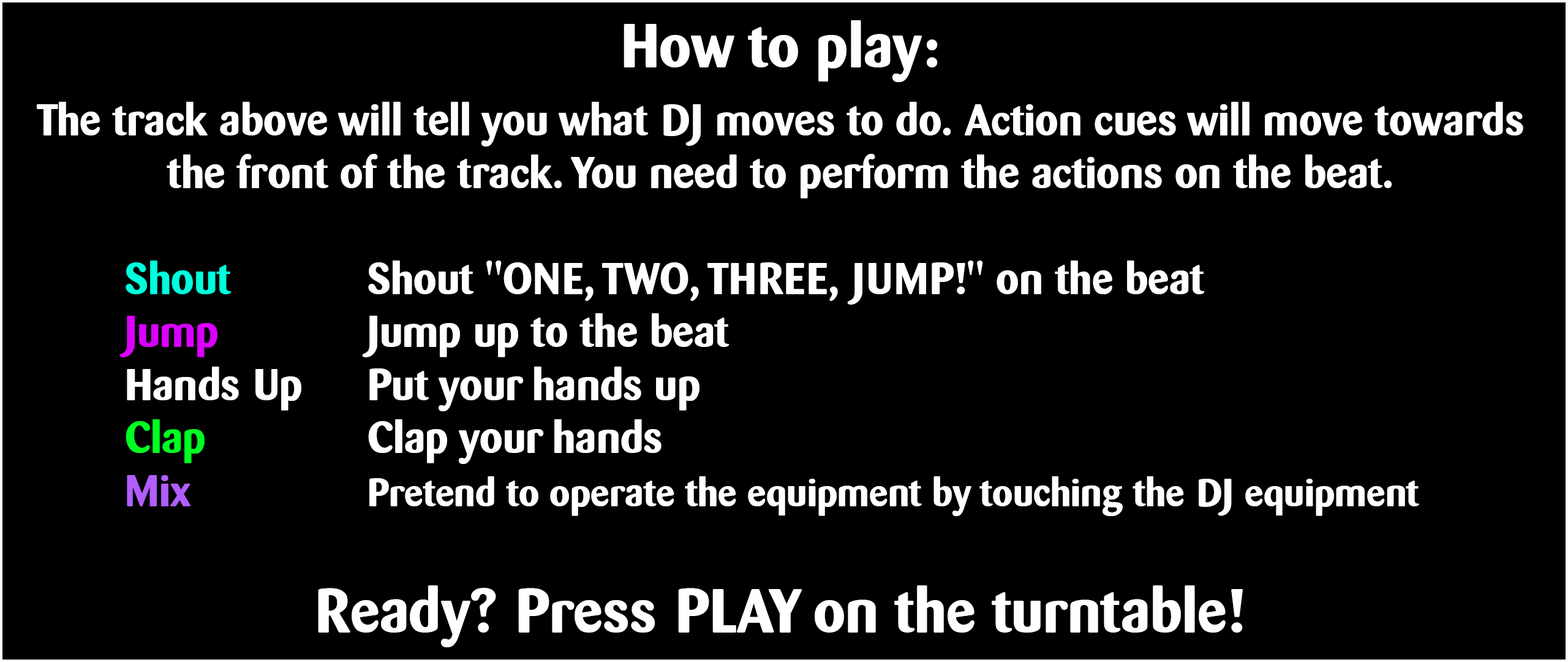
<style>
.page{position:relative;width:1568px;height:662px;background:#000000}
.page>*{position:absolute;margin:0}
.t1{font:44.1px "Barmeno-Bold";color:#ffffff}
.t2{font:61.3px "Barmeno-Bold";color:#ffffff}
.t3{font:44.1px "Barmeno-Bold";color:#00ffdd}
.t4{font:44.1px "Barmeno-Bold";color:#d900ff}
.t5{font:44.1px "Barmeno-Bold";color:#00ff22}
.t6{font:44.1px "Barmeno-Bold";color:#b15dff}
.t7{font:39.2px "Barmeno-Bold";color:#ffffff}
</style>
<div class="page">
<p class="t1" style="left:37px;top:20px;width:1486px;height:627px;text-align:center"><span class="t2">How to play:<br><br></span>The track above will tell you what DJ moves to do. Action cues will move towards the front of the track. You need to perform the actions on the beat.<br><br>     <span class="t3">Shout</span>       Shout "ONE, TWO, THREE, JUMP!" on the beat<br>     <span class="t4">Jump</span>       Jump up to the beat<br>     Hands Up   Put your hands up<br>     <span class="t5">Clap </span>       Clap your hands<br>     <span class="t6">Mix         </span><span class="t7">Pretend to operate the equipment by touching the DJ equipment<br><br></span><span class="t2">Ready? Press PLAY on the turntable!</span></p>
</div>
